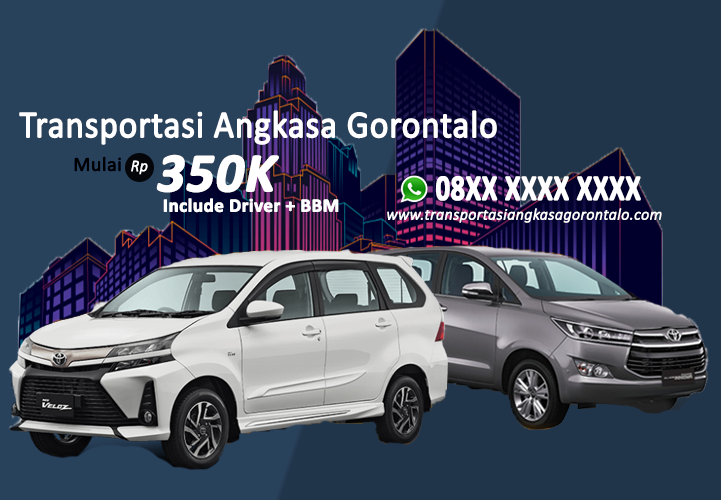
<style>
.page{position:relative;width:721px;height:500px;background:#21354a}
.page>*{position:absolute;margin:0}
.t1{font:38.5px "Calibri";color:#ffffff;font-weight:bold;scale:0.91 1}
.t2{font:20px "Calibri";color:#010101;font-weight:bold}
.t3{font:16px "Calibri-LightItalic";color:#ffffff;font-weight:bold}
.t4{font:55px "Calibri-BoldItalic";color:#ffffff;font-weight:bold}
.t5{font:36.4px "Calibri-Bold";color:#ffffff;font-weight:bold;scale:0.77 1}
.t6{font:19px "Calibri-Bold";color:#ffffff;font-weight:bold}
</style>
<div class="page">
<p class="t1" style="left:19px;top:110px;width:478px;height:35px">Transportasi Angkasa Gorontalo</p>
<p class="t2" style="left:74px;top:156px;width:47px;height:16px">Mulai</p>
<p class="t3" style="left:131px;top:160px;width:17px;height:15px">Rp</p>
<p class="t4" style="left:156px;top:154px;width:123px;height:39px">350K</p>
<p class="t5" style="left:436px;top:176px;width:205px;height:25px">08XX XXXX XXXX</p>
<p class="t6" style="left:163px;top:198px;width:176px;height:15px">Include Driver + BBM</p>
<p class="t3" style="left:387px;top:208px;width:275px;height:15px">www.transportasiangkasagorontalo.com</p>
</div>
